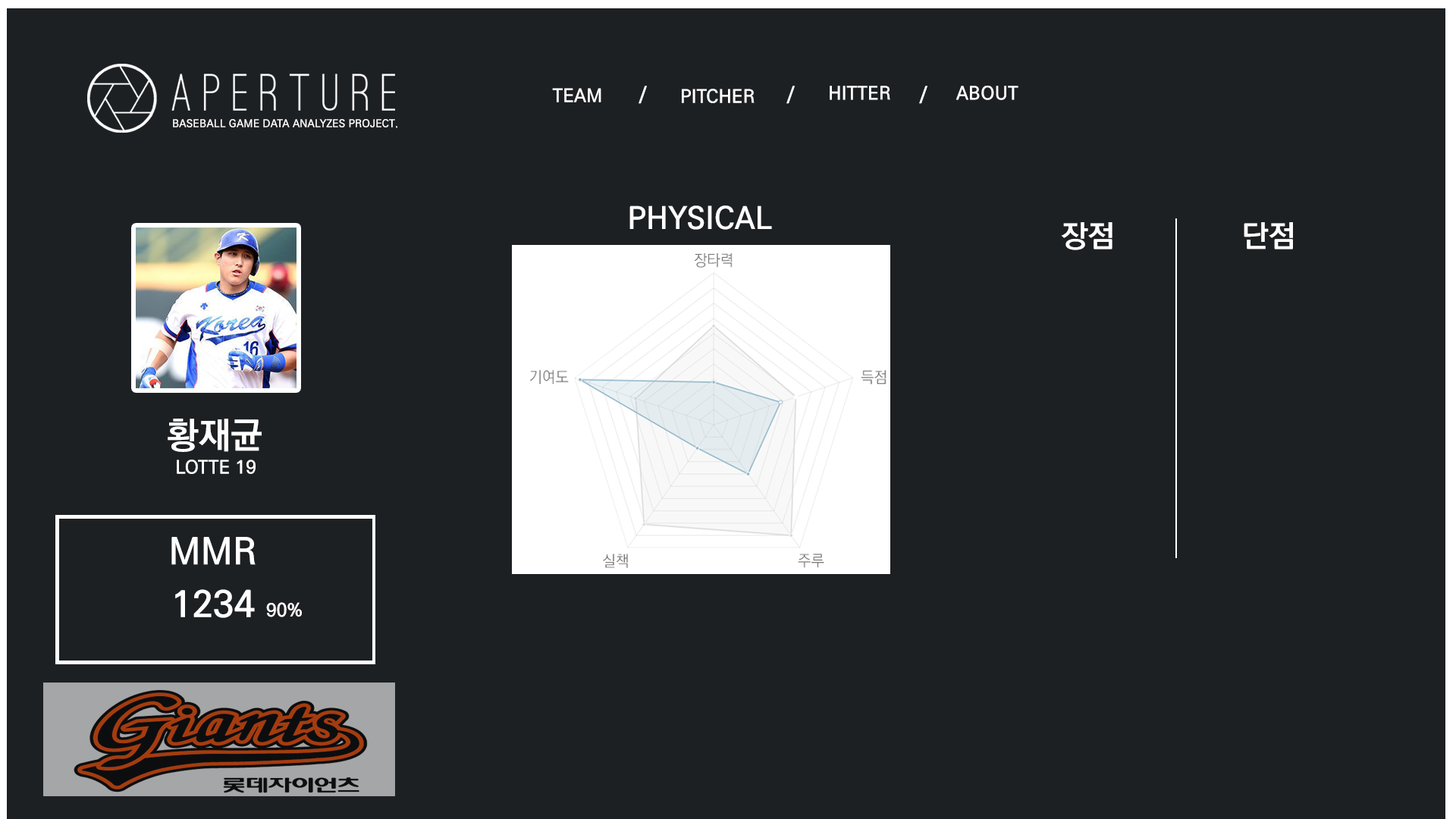
<style>
.page{position:relative;width:1456px;height:819px;background:#1d2023}
.page>*{position:absolute;margin:0}
.t1{font:18.2px "KoPubDotumPB";letter-spacing:0.01em;color:#ffffff}
.t2{font:10.6px "KoPubDotumPB";letter-spacing:0.01em;color:#ffffff}
.t3{font:30.3px "KoPubDotumPB";letter-spacing:0.01em;color:#fefeff}
.t4{font:36.4px "KoPubDotumPB";letter-spacing:0.01em;color:#ffffff}
.t5{font:36.4px "KoPubDotumPB";letter-spacing:0.01em;color:#fefeff}
.t6{font:18.2px "KoPubDotumPB";letter-spacing:0.01em;color:#fefeff}
</style>
<div class="page">
<p class="t1" style="left:552px;top:88px;width:49px;height:14px">TEAM</p>
<p class="t1" style="left:639px;top:86px;width:8px;height:18px">/</p>
<p class="t1" style="left:682px;top:89px;width:73px;height:14px">PITCHER</p>
<p class="t1" style="left:786px;top:86px;width:9px;height:18px">/</p>
<p class="t1" style="left:830px;top:86px;width:60px;height:14px">HITTER</p>
<p class="t1" style="left:919px;top:86px;width:8px;height:18px">/</p>
<p class="t1" style="left:955px;top:86px;width:63px;height:14px">ABOUT</p>
<p class="t2" style="left:173px;top:119px;width:224px;height:9px">BASEBALL GAME DATA ANALYZES PROJECT.</p>
<p class="t3" style="left:629px;top:206px;width:143px;height:24px">PHYSICAL</p>
<p class="t3" style="left:1061px;top:222px;width:232px;height:28px">장점              단점</p>
<p class="t4" style="left:168px;top:419px;width:94px;height:33px">황재균</p>
<p class="t1" style="left:177px;top:460px;width:79px;height:14px">LOTTE 19</p>
<p class="t5" style="left:171px;top:537px;width:85px;height:28px">MMR</p>
<p class="t5" style="left:175px;top:589px;width:127px;height:29px">1234 <span class="t6">90%</span></p>
</div>
